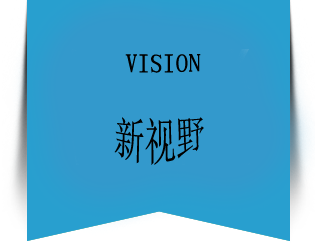
<style>
.page{position:relative;width:315px;height:250px;background:#3399cc}
.page>*{position:absolute;margin:0}
.t1{font:36px "SimSun";color:#000000;font-variant:small-caps}
.t2{font:30px "SimSun";color:#000000;font-variant:small-caps}
</style>
<div class="page">
<p class="t1" style="left:110px;top:45px;width:91px;height:33px"><span class="t2"> </span>vision</p>
<p class="t2" style="left:100px;top:115px;width:105px;height:59px">新视野</p>
</div>
